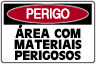
<style>
.page{position:relative;width:96px;height:64px;background:#ffffff}
.page>*{position:absolute;margin:0}
.t1{font:12.6px "Helvetica";letter-spacing:-0.005em;color:#ffffff;font-weight:bold;scale:0.86 1}
.t2{font:13px/11px "CartesDisplaySSK";color:#000000}
.t3{font:9.8px "CartesDisplaySSK";color:#000000;scale:1.64 1}
</style>
<div class="page">
<p class="t1" style="left:26px;top:8px;width:44px;height:11px">PERIGO</p>
<p class="t2" style="left:14px;top:28px;width:68px;height:33px;text-align:center">AREA COM<br>MATERIAIS<br>PERIGOSOS</p>
<p class="t3" style="left:19px;top:24px;width:3px;height:4px">,</p>
</div>
